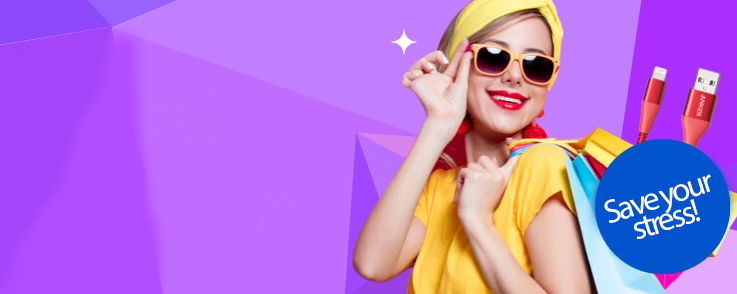
<style>
.page{position:relative;width:737px;height:294px}
.page>*{position:absolute;margin:0}
.t1{font:33px/24.1px "MyriadPro-Regular";letter-spacing:-0.08em;color:#ffffff}
</style>
<div class="page">
<p class="t1" style="left:604px;top:174px;width:107px;height:65px;text-align:center;rotate:-18deg">Save your<br>stress!</p>
</div>
